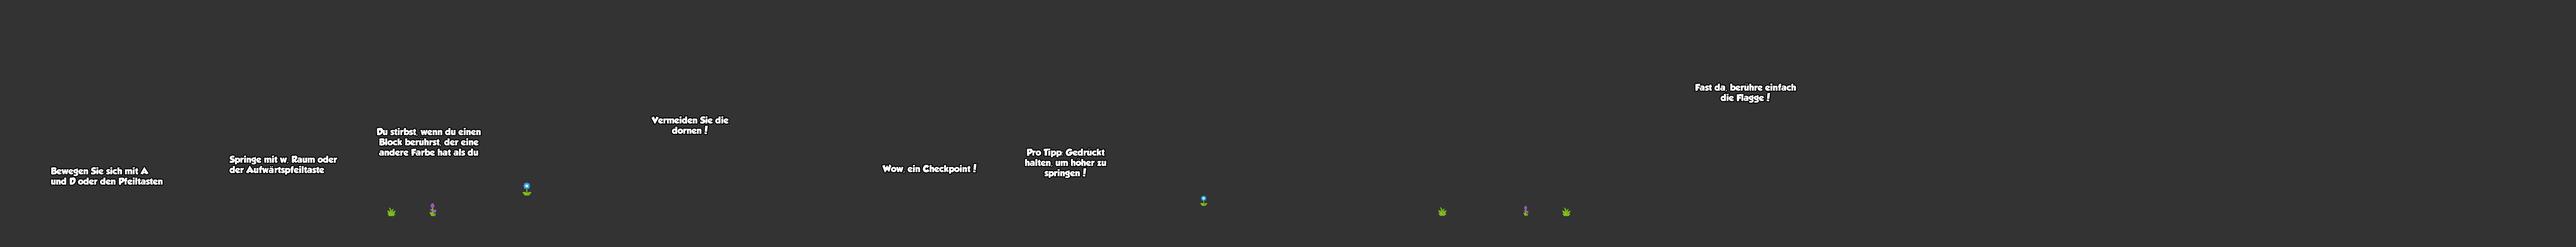
<style>
.page{position:relative;width:2576px;height:247px;background:#333333}
.page>*{position:absolute;margin:0}
.t1{font:8.6px "GROBOLD";color:#ffffff}
.t2{font:8.6px "MyriadPro-Regular";color:#ffffff}
</style>
<div class="page">
<p class="t1" style="left:1695px;top:83px;width:101px;height:20px;text-align:center">Fast da, beruhre einfach die Flagge!</p>
<p class="t2" style="left:1745px;top:84px;width:3px;height:1px">¨</p>
<p class="t1" style="left:651px;top:116px;width:78px;height:19px;text-align:center">Vermeiden Sie die dornen!</p>
<p class="t1" style="left:377px;top:128px;width:104px;height:28px;text-align:center">Du stirbst, wenn du einen Block beruhrst, der eine andere Farbe hat als du</p>
<p class="t2" style="left:420px;top:138px;width:3px;height:1px">¨</p>
<p class="t1" style="left:1025px;top:148px;width:81px;height:30px;text-align:center">Pro Tipp: Gedruckt halten, um hoher zu springen!</p>
<p class="t2" style="left:1088px;top:149px;width:3px;height:1px">¨</p>
<p class="t1" style="left:229px;top:156px;width:108px;height:19px">Springe mit w, Raum oder der Aufw  rtspfeiltaste</p>
<p class="t2" style="left:1077px;top:159px;width:3px;height:1px">¨</p>
<p class="t1" style="left:51px;top:167px;width:112px;height:18px">Bewegen Sie sich mit A und D oder den Pfeiltasten</p>
<p class="t1" style="left:269px;top:166px;width:5px;height:8px">ä</p>
<p class="t1" style="left:882px;top:164px;width:95px;height:10px">Wow, ein Checkpoint!</p>
</div>
